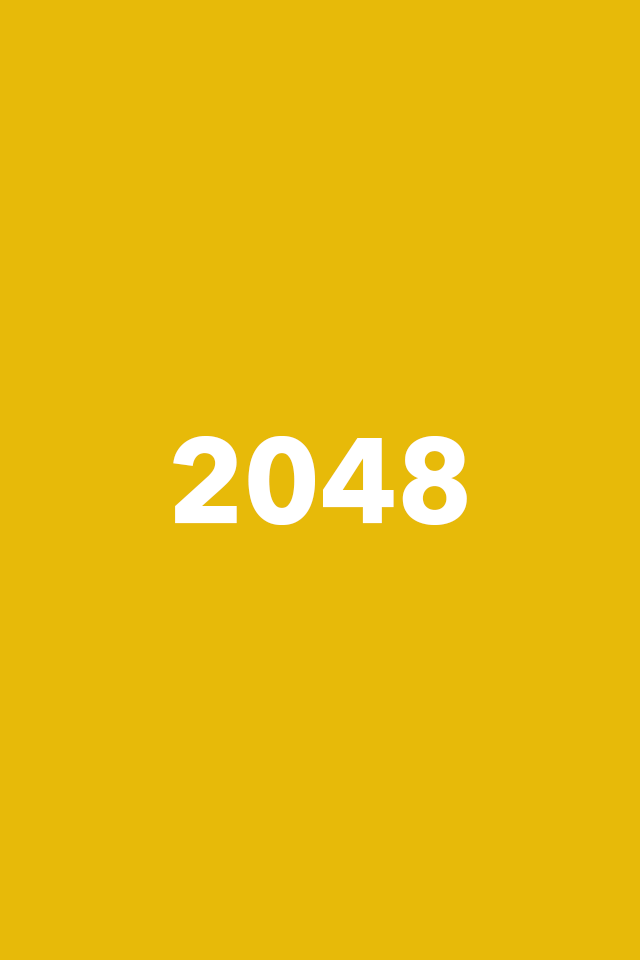
<style>
.page{position:relative;width:640px;height:960px;background:#e7ba09}
.page>*{position:absolute;margin:0}
.t1{font:120px "AvenirNext-Bold";letter-spacing:-0.01em;color:#ffffff;text-transform:uppercase}
</style>
<div class="page">
<p class="t1" style="left:173px;top:436px;width:294px;height:89px">2048</p>
</div>
